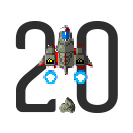
<style>
.page{position:relative;width:133px;height:133px;background:#ffffff}
.page>*{position:absolute;margin:0}
.t1{font:120.4px "GearedSlab-Thin";color:#2e2e2e}
</style>
<div class="page">
<p class="t1" style="left:15px;top:21px;width:103px;height:92px">2.0</p>
</div>
